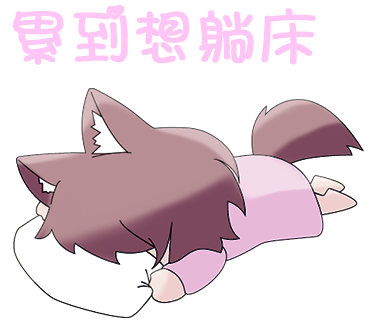
<style>
.page{position:relative;width:370px;height:320px;background:#ffffff}
.page>*{position:absolute;margin:0}
.t1{font:64px "ARTianniuB5-Bold";color:#ffc6f5;font-weight:bold}
</style>
<div class="page">
<p class="t1" style="left:13px;top:5px;width:303px;height:60px">累到想躺床</p>
</div>
